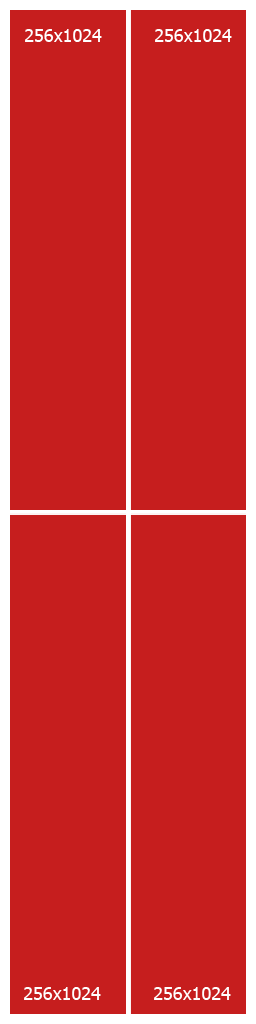
<style>
.page{position:relative;width:256px;height:1024px;background:#c61e1e}
.page>*{position:absolute;margin:0}
.t1{font:18px "Tahoma";color:#ffffff}
</style>
<div class="page">
<p class="t1" style="left:25px;top:29px;width:77px;height:13px">256x1024</p>
<p class="t1" style="left:155px;top:29px;width:77px;height:13px">256x1024</p>
<p class="t1" style="left:24px;top:987px;width:77px;height:13px">256x1024</p>
<p class="t1" style="left:154px;top:987px;width:77px;height:13px">256x1024</p>
</div>
